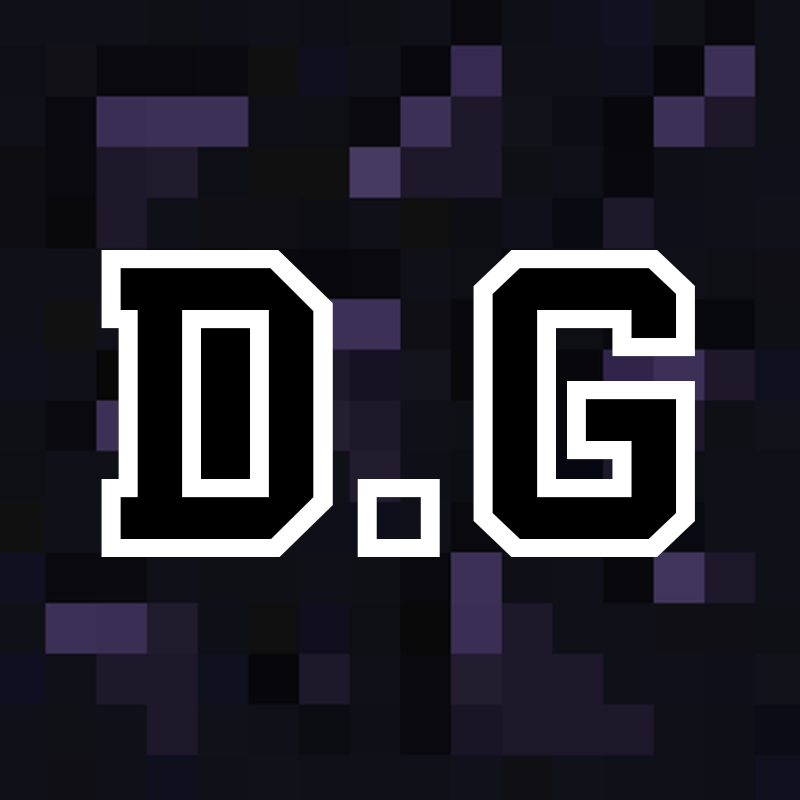
<style>
.page{position:relative;width:800px;height:800px}
.page>*{position:absolute;margin:0}
.t1{font:426px "Academy-Regular";color:#ffffff}
</style>
<div class="page">
<p class="t1" style="left:101px;top:250px;width:594px;height:307px">D.G</p>
</div>
